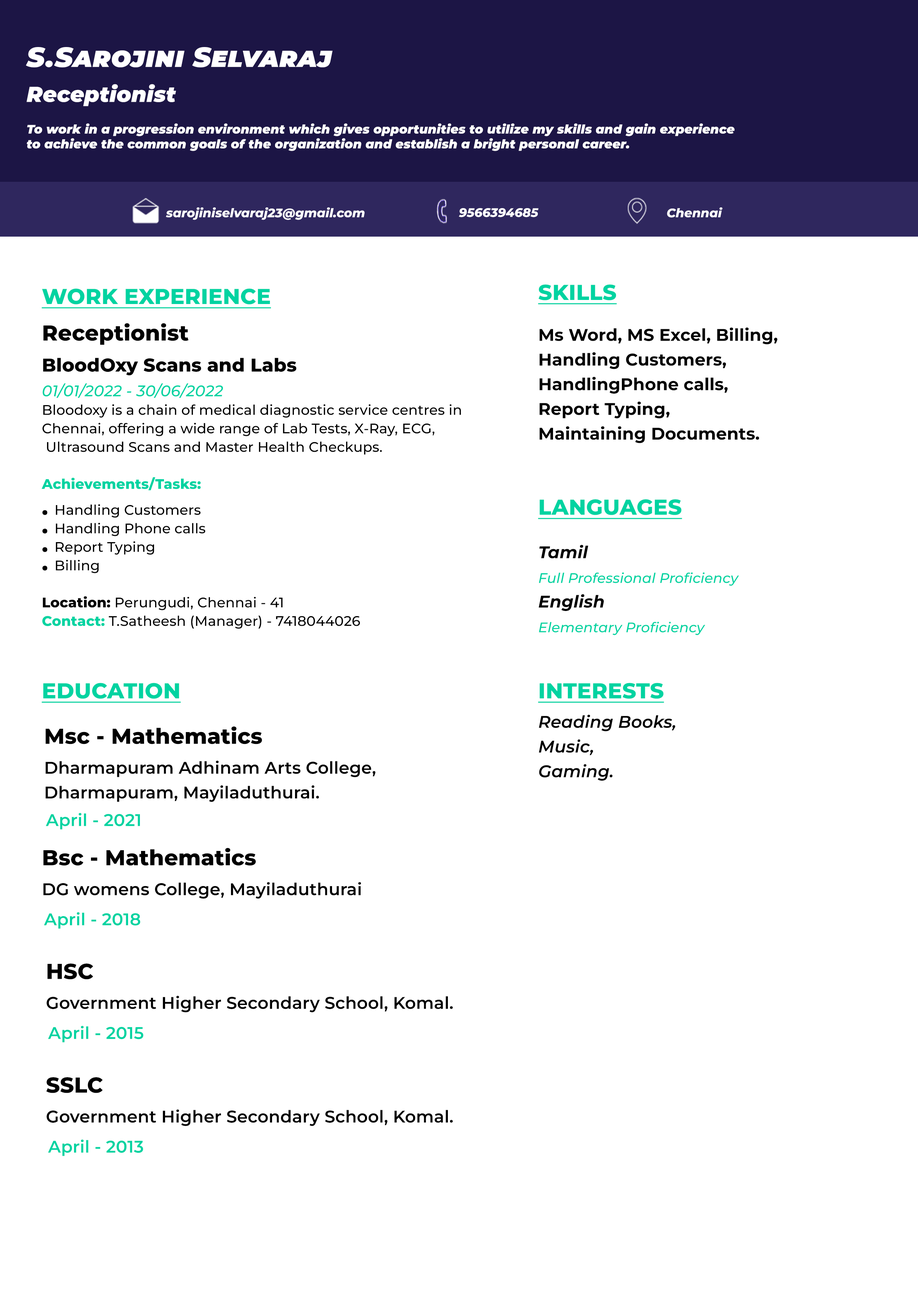
<style>
.page{position:relative;width:918px;height:1299px;background:#ffffff}
.page>*{position:absolute;margin:0}
.t1{font:27.8px "MontserratItalic-BlackItalic";letter-spacing:0.005em;color:#ffffff;font-variant:small-caps}
.t2{font:21.6px "MontserratItalic-BlackItalic";letter-spacing:0.005em;color:#ffffff}
.t3{font:12.3px "MontserratItalic-BlackItalic";letter-spacing:0.005em;color:#ffffff}
.t4{font:12.3px "MontserratItalic-ExtraBoldItalic";color:#ffffff}
.t5{font:21.6px "MontserratRoman-ExtraBold";letter-spacing:0.005em;color:#00d3a1;text-transform:uppercase;text-decoration:underline}
.t6{font:21.6px "MontserratRoman-ExtraBold";letter-spacing:0.005em;color:#000000}
.t7{font:17px/24.7px "MontserratRoman-Bold";letter-spacing:0.005em;color:#000000}
.t8{font:13.9px/18.5px "MontserratRoman-Medium";letter-spacing:0.005em;color:#000000}
.t9{font:18.5px/24.7px "MontserratRoman-ExtraBold";letter-spacing:0.005em;color:#000000}
.t10{font:15.4px/24.7px "MontserratItalic-MediumItalic";letter-spacing:0.005em;color:#00d3a1}
.t11{font:15.4px/18.5px "MontserratItalic-MediumItalic";letter-spacing:0.005em;color:#00d3a1}
.t12{font:13.9px/18.5px "MontserratRoman-ExtraBold";letter-spacing:0.005em;color:#00d3a1}
.t13{font:13.9px "MontserratRoman-ExtraBold";letter-spacing:0.005em;color:#00d3a1}
.t14{font:13.9px "MontserratRoman-Medium";letter-spacing:0.005em;color:#000000}
.t15{font:21.6px/18.5px "MontserratRoman-ExtraBold";letter-spacing:0.005em;color:#000000}
.t16{font:13.9px/18.5px "MontserratRoman-ExtraBold";letter-spacing:0.005em;color:#000000}
.t17{font:13.9px/24.7px "MontserratItalic-MediumItalic";letter-spacing:0.005em;color:#00d3a1}
.t18{font:17px/24.7px "MontserratItalic-BoldItalic";letter-spacing:0.005em;color:#000000}
.t19{font:17px/24.7px "MontserratItalic-SemiBoldItalic";letter-spacing:0.005em;color:#000000}
.t20{font:17px/24.7px "MontserratRoman-SemiBold";letter-spacing:0.005em;color:#000000}
.t21{font:17px "MontserratRoman-SemiBold";letter-spacing:0.005em;color:#00d3a1}
.t22{font:17px "MontserratRoman-SemiBold";letter-spacing:0.005em;color:#000000}
</style>
<div class="page">
<p class="t1" style="left:26px;top:47px;width:307px;height:20px">S.Sarojini Selvaraj</p>
<p class="t2" style="left:26px;top:84px;width:150px;height:22px">Receptionist</p>
<p class="t3" style="left:27px;top:123px;width:708px;height:28px">To work in a progression environment which gives opportunities to utilize my skills and gain experience to achieve the common goals of the organization and establish a bright personal career.</p>
<p class="t4" style="left:166px;top:207px;width:199px;height:13px">sarojiniselvaraj23@gmail.com</p>
<p class="t4" style="left:459px;top:208px;width:80px;height:9px">9566394685</p>
<p class="t4" style="left:667px;top:207px;width:56px;height:11px">Chennai</p>
<p class="t5" style="left:41px;top:288px;width:230px;height:20px">Work Experience</p>
<p class="t5" style="left:538px;top:284px;width:79px;height:20px">Skills</p>
<p class="t6" style="left:43px;top:323px;width:146px;height:22px">Receptionist</p>
<p class="t7" style="left:539px;top:327px;width:238px;height:116px">Ms Word, MS Excel, Billing, <br>Handling Customers, <br>HandlingPhone calls, <br>Report Typing, <br>Maintaining Documents.</p>
<p class="t8" style="left:41px;top:358px;width:420px;height:271px"><span class="t9">BloodOxy Scans and Labs<br></span><span class="t10">01/01/2022 - 30/06/20</span><span class="t11">22<br></span>Bloodoxy is a chain of medical diagnostic service centres in Chennai, offering a wide range of Lab Tests, X-Ray, ECG,<br> Ultrasound Scans and Master Health Checkups.<br><br><span class="t12">Achiev</span><span class="t13">ements/Tasks:<br></span><span class="t6">. </span><span class="t14">Handling</span> Customers<br><span class="t15">. </span>Handling Phone calls<br><span class="t15">. </span>Report Typing<br><span class="t15">. </span>Billing<br><br><span class="t16">Location:</span> Perungudi, Chennai - 41<br><span class="t12">Contact:</span> T.Satheesh (Manager) - 7418044026</p>
<p class="t5" style="left:538px;top:499px;width:144px;height:20px">Languages</p>
<p class="t17" style="left:539px;top:545px;width:200px;height:90px"><span class="t18">Tamil<br></span>Full Professional Proficiency<br><span class="t18">English<br></span>Elementary Proficiency</p>
<p class="t5" style="left:41px;top:683px;width:140px;height:20px">Education</p>
<p class="t5" style="left:538px;top:683px;width:126px;height:20px">Interests</p>
<p class="t19" style="left:539px;top:715px;width:136px;height:66px">Reading Books, <br>Music, <br>Gaming.</p>
<p class="t6" style="left:46px;top:726px;width:216px;height:18px">Msc - Mathematics</p>
<p class="t20" style="left:46px;top:760px;width:329px;height:42px">Dharmapuram Adhinam Arts College,<br>Dharmapuram, Mayiladuthurai.</p>
<p class="t21" style="left:46px;top:813px;width:94px;height:16px">April - 2021</p>
<p class="t6" style="left:43px;top:848px;width:213px;height:18px">Bsc - Mathematics</p>
<p class="t22" style="left:43px;top:882px;width:318px;height:17px">DG womens College, Mayiladuthurai</p>
<p class="t21" style="left:44px;top:912px;width:96px;height:17px">April - 2018</p>
<p class="t6" style="left:47px;top:963px;width:46px;height:16px">HSC</p>
<p class="t22" style="left:47px;top:996px;width:406px;height:16px">Government Higher Secondary School, Komal.</p>
<p class="t21" style="left:48px;top:1026px;width:95px;height:16px">April - 2015</p>
<p class="t6" style="left:46px;top:1077px;width:57px;height:16px">SSLC</p>
<p class="t22" style="left:47px;top:1109px;width:406px;height:17px">Government Higher Secondary School, Komal.</p>
<p class="t21" style="left:48px;top:1139px;width:95px;height:17px">April - 2013</p>
</div>
